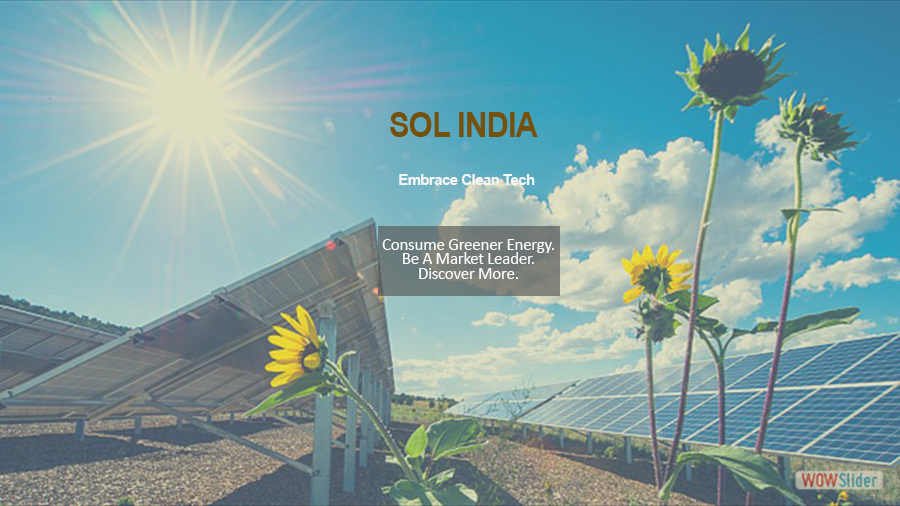
<style>
.page{position:relative;width:900px;height:506px}
.page>*{position:absolute;margin:0}
.t1{font:34.9px "Arial-BoldMT";letter-spacing:-0.025em;color:#75520c;scale:0.88 1}
.t2{font:14.6px "Arial-BoldMT";letter-spacing:-0.025em;color:#f7f7f7}
.t3{font:17.3px/14.7px "Calibri";letter-spacing:-0.025em;color:#ffffff}
</style>
<div class="page">
<p class="t1" style="left:390px;top:112px;width:148px;height:25px">SOL INDIA</p>
<p class="t2" style="left:399px;top:174px;width:136px;height:11px">Embrace Clean Tech</p>
<p class="t3" style="left:382px;top:239px;width:172px;height:40px;text-align:center">Consume Greener Energy.<br>Be A Market Leader.<br>Discover More.</p>
</div>
